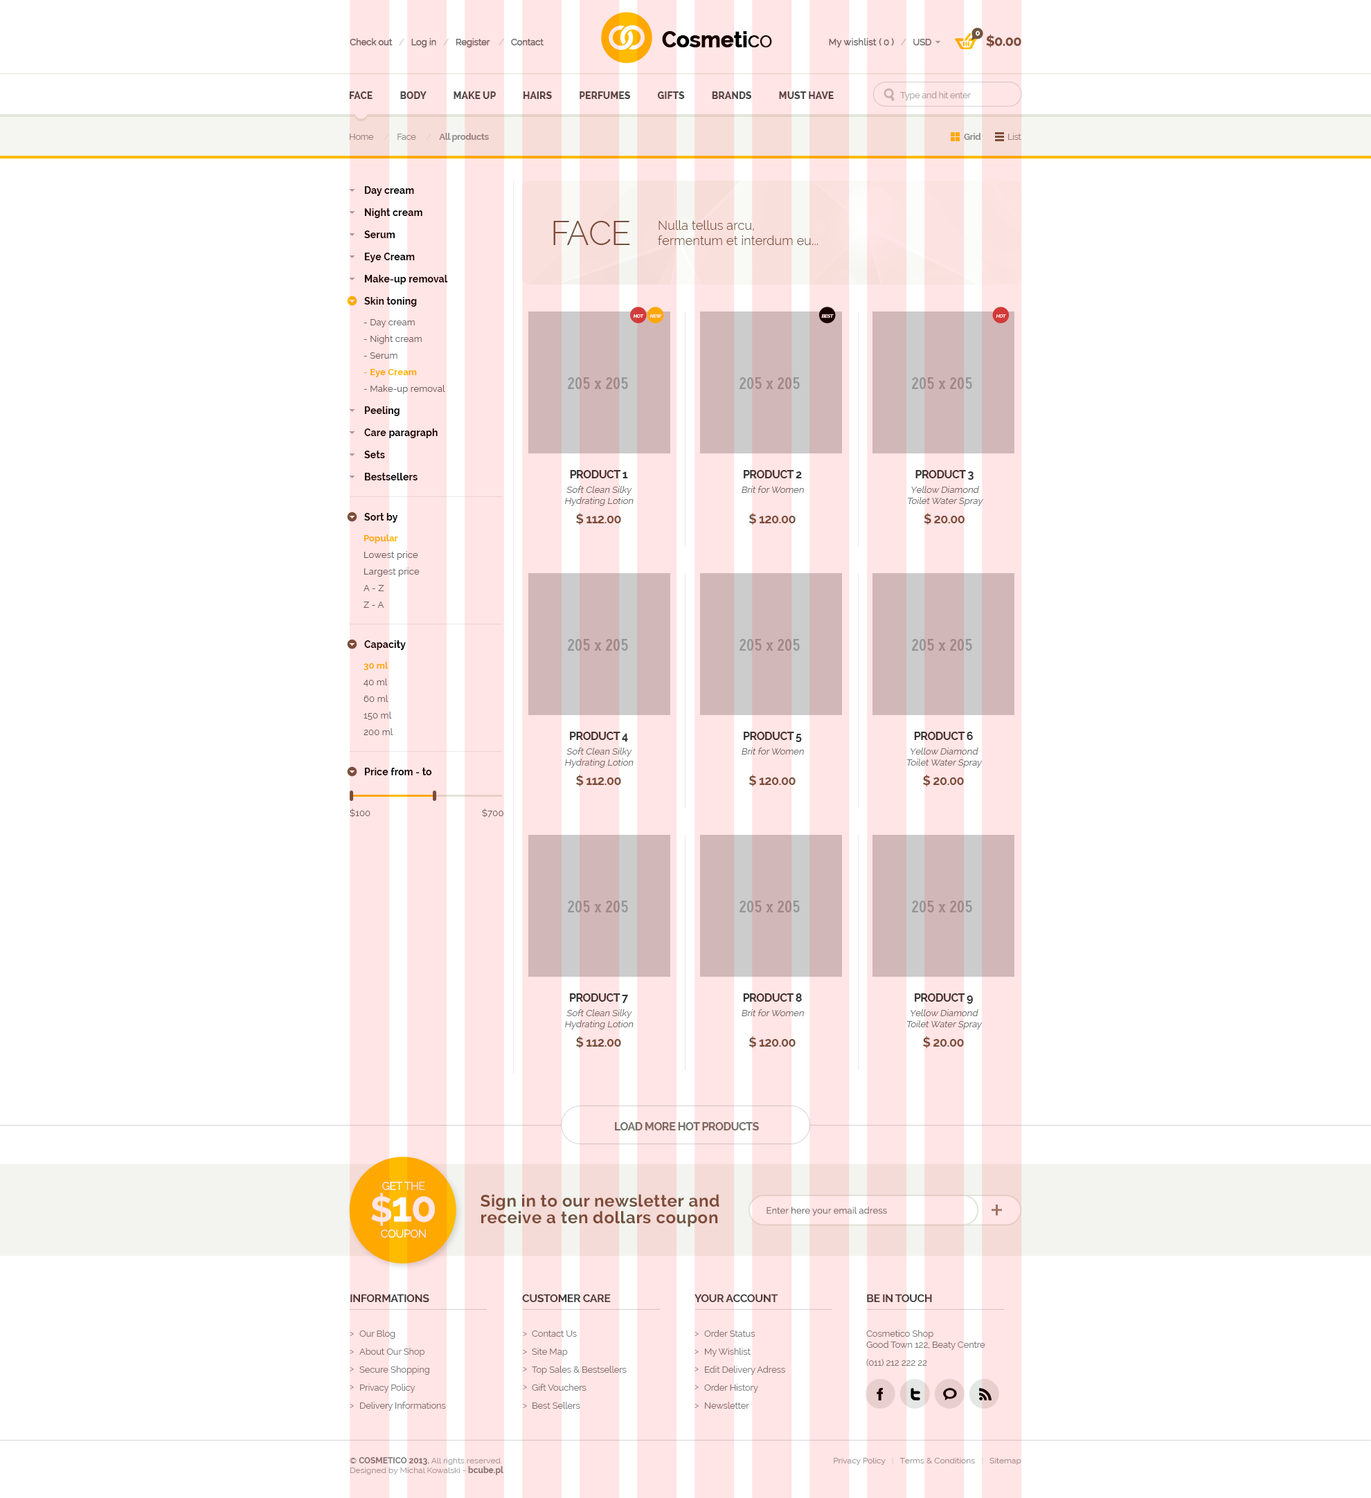
<style>
.page{position:relative;width:1371px;height:1498px;background:#ffffff}
.page>*{position:absolute;margin:0}
.t1{font:9px "Raleway";letter-spacing:-0.03em;color:#727272;font-weight:bold}
.t2{font:9px "Raleway";letter-spacing:-0.03em;color:#d5d5d5;font-weight:bold}
.t3{font:9px "Raleway";letter-spacing:-0.03em;color:#dcdcdc;font-weight:bold}
.t4{font:21.7px "Raleway-Bold";letter-spacing:-0.025em;font-weight:bold}
.t5{font:21.7px "Raleway";letter-spacing:-0.025em;font-weight:bold}
.t6{font:21.7px "Raleway-Light";letter-spacing:-0.025em;font-weight:bold}
.t7{font:9px "Raleway";color:#727272;font-weight:bold}
.t8{font:7.5px "Raleway-Bold";letter-spacing:-0.03em;color:#ffffff}
.t9{font:13.8px "Raleway-Bold";letter-spacing:-0.03em;color:#70543f}
.t10{font:9.7px "Raleway-ExtraBold";color:#4b4b4b}
.t11{font:9px "Raleway";letter-spacing:-0.03em;color:#a8a8a8}
.t12{font:9px "Raleway-Bold";letter-spacing:-0.03em;color:#8f8f8f}
.t13{font:9px "Raleway";letter-spacing:-0.03em;color:#8f8f8f}
.t14{font:9px "Raleway";letter-spacing:-0.03em;color:#e3e6db}
.t15{font:9.7px/22.2px "Raleway-Bold";letter-spacing:0.01em;color:#1a0000}
.t16{font:33.2px "Raleway-Light";letter-spacing:-0.03em;color:#70543f}
.t17{font:12.5px "Raleway-Light";letter-spacing:0.01em;color:#70543f}
.t18{font:4.5px "Raleway-Bold";font-style:italic}
.t19{font:4.5px "Raleway-Bold";color:#ffe5e5;font-style:italic}
.t20{font:9px/16.6px "Raleway";letter-spacing:0.01em;color:#636363}
.t21{font:9px/16.6px "Raleway";letter-spacing:0.01em;color:#ffbb00}
.t22{font:9px/16.6px "Raleway-Bold";letter-spacing:0.01em;color:#ffbb00}
.t23{font:9px "Raleway";color:#6e6e6e;font-style:italic}
.t24{font:11.1px/4.3px "Raleway-Bold";letter-spacing:-0.03em;color:#353535}
.t25{font:9.7px "Raleway-Bold";letter-spacing:0.01em;color:#1a0000}
.t26{font:12.5px "Raleway-Bold";letter-spacing:-0.03em;color:#70543f}
.t27{font:9.7px "Raleway-Bold";letter-spacing:0.01em}
.t28{font:9px "Raleway";letter-spacing:0.01em;color:#636363}
.t29{font:11.1px "Raleway-Bold";letter-spacing:-0.03em;color:#70726a}
.t30{font:11px/29.3px "Raleway";letter-spacing:-0.03em;color:#ffe5e5}
.t31{font:35.1px/31.8px "Raleway-Bold";letter-spacing:-0.03em;color:#ffe5e5}
.t32{font:42.1px/31.8px "Raleway-Bold";letter-spacing:-0.03em;color:#ffe5e5}
.t33{font:11px/15.9px "Raleway";letter-spacing:-0.03em;color:#ffe5e5}
.t34{font:16.6px/16.6px "Raleway-Bold";letter-spacing:0.025em;color:#70543f}
.t35{font:9px "Raleway";letter-spacing:0.01em;color:#717171}
.t36{font:11.1px "Raleway-Bold";letter-spacing:-0.03em;color:#3f3f3f}
.t37{font:9px/18px "Raleway";letter-spacing:-0.01em;color:#7b7b7b}
.t38{font:9px "Raleway";letter-spacing:-0.01em;color:#7b7b7b}
.t39{font:8.3px "Raleway";color:#a1a1a1}
.t40{font:8.3px "Raleway";color:#7b7b7b}
.t41{font:8.3px "Raleway-Bold";color:#7b7b7b}
.t42{font:8.3px "Raleway";color:#a3a3a3}
.t43{font:8.3px "Raleway";color:#999999}
.t44{font:8.3px "Raleway";color:#e0e0e0}
.t45{font:8.3px "Raleway";color:#e4e4e4}
</style>
<div class="page">
<p class="t1" style="left:350px;top:38px;width:193px;height:10px">Check out   <span class="t2">/</span>   Log in   <span class="t3">/</span>   Register    <span class="t3">/</span>   Contact</p>
<p class="t4" style="left:662px;top:31px;width:110px;height:17px">Cosmeti<span class="t5">c</span><span class="t6">o</span></p>
<p class="t7" style="left:829px;top:38px;width:102px;height:10px">My wishlist <span class="t1">( 0 )   </span><span class="t2">/</span><span class="t1">   USD</span></p>
<p class="t8" style="left:975px;top:30px;width:5px;height:6px">0</p>
<p class="t9" style="left:986px;top:34px;width:35px;height:14px">$0.00</p>
<p class="t10" style="left:350px;top:91px;width:484px;height:8px">FACE            BODY            MAKE UP            HAIRS            PERFUMES            GIFTS            BRANDS            MUST HAVE</p>
<p class="t11" style="left:900px;top:91px;width:71px;height:9px">Type and hit enter</p>
<p class="t12" style="left:350px;top:133px;width:139px;height:9px"><span class="t13">Home     </span><span class="t14">/</span><span class="t13">    Face     </span><span class="t14">/    </span>All products</p>
<p class="t12" style="left:964px;top:133px;width:17px;height:7px">Grid</p>
<p class="t13" style="left:1008px;top:133px;width:13px;height:7px">List</p>
<p class="t15" style="left:364px;top:186px;width:84px;height:121px">Day cream<br>Night cream<br>Serum<br>Eye Cream<br>Make-up removal<br>Skin toning</p>
<p class="t16" style="left:553px;top:221px;width:77px;height:24px">FACE</p>
<p class="t17" style="left:658px;top:220px;width:160px;height:25px">Nulla tellus arcu, <br>fermentum et interdum eu...</p>
<p class="t18" style="left:633px;top:314px;width:11px;height:4px">HOT</p>
<p class="t19" style="left:649px;top:314px;width:13px;height:4px">NEW</p>
<p class="t19" style="left:821px;top:314px;width:13px;height:4px">BEST</p>
<p class="t19" style="left:996px;top:314px;width:10px;height:4px">HOT</p>
<p class="t20" style="left:363px;top:319px;width:82px;height:75px">- Day cream<br>- Night cream<br>- Serum<br><span class="t21">- </span><span class="t22">Eye Cream<br></span>- Make-up removal</p>
<p class="t15" style="left:364px;top:406px;width:74px;height:74px">Peeling<br>Care paragraph<br>Sets<br>Bestsellers</p>
<p class="t23" style="left:565px;top:470px;width:68px;height:36px;text-align:center"><span class="t24">PRODUCT 1<br><br></span>Soft Clean Silky<br>Hydrating Lotion</p>
<p class="t23" style="left:741px;top:470px;width:63px;height:23px;text-align:center"><span class="t24">PRODUCT 2<br><br></span>Brit for Women</p>
<p class="t23" style="left:908px;top:470px;width:75px;height:36px;text-align:center"><span class="t24">PRODUCT 3<br><br></span>Yellow Diamond<br>Toilet Water Spray</p>
<p class="t25" style="left:364px;top:513px;width:34px;height:10px">Sort by</p>
<p class="t26" style="left:576px;top:513px;width:45px;height:12px">$ 112.00</p>
<p class="t26" style="left:748px;top:513px;width:47px;height:12px">$ 120.00</p>
<p class="t26" style="left:924px;top:513px;width:40px;height:12px">$ 20.00</p>
<p class="t20" style="left:363px;top:534px;width:57px;height:74px"><span class="t22">Popular<br></span>Lowest price<br>Largest price<br>A - Z<br>Z - A</p>
<p class="t27" style="left:364px;top:640px;width:42px;height:10px">Capacity</p>
<p class="t20" style="left:363px;top:662px;width:30px;height:73px"><span class="t22">30 ml<br></span>40 ml<br>60 ml<br>150 ml<br>200 ml</p>
<p class="t23" style="left:565px;top:732px;width:68px;height:36px;text-align:center"><span class="t24">PRODUCT 4<br><br></span>Soft Clean Silky<br>Hydrating Lotion</p>
<p class="t23" style="left:741px;top:732px;width:63px;height:23px;text-align:center"><span class="t24">PRODUCT 5<br><br></span>Brit for Women</p>
<p class="t23" style="left:906px;top:732px;width:76px;height:36px;text-align:center"><span class="t24">PRODUCT 6<br><br></span>Yellow Diamond<br>Toilet Water Spray</p>
<p class="t25" style="left:364px;top:768px;width:68px;height:7px">Price from - to</p>
<p class="t26" style="left:576px;top:775px;width:45px;height:11px">$ 112.00</p>
<p class="t26" style="left:748px;top:775px;width:47px;height:11px">$ 120.00</p>
<p class="t26" style="left:923px;top:775px;width:41px;height:11px">$ 20.00</p>
<p class="t28" style="left:350px;top:809px;width:20px;height:9px">$100</p>
<p class="t28" style="left:482px;top:809px;width:21px;height:9px">$700</p>
<p class="t23" style="left:565px;top:993px;width:68px;height:36px;text-align:center"><span class="t24">PRODUCT 7<br><br></span>Soft Clean Silky<br>Hydrating Lotion</p>
<p class="t23" style="left:741px;top:993px;width:63px;height:23px;text-align:center"><span class="t24">PRODUCT 8<br><br></span>Brit for Women</p>
<p class="t23" style="left:906px;top:993px;width:76px;height:36px;text-align:center"><span class="t24">PRODUCT 9<br><br></span>Yellow Diamond<br>Toilet Water Spray</p>
<p class="t26" style="left:576px;top:1036px;width:45px;height:12px">$ 112.00</p>
<p class="t26" style="left:748px;top:1036px;width:47px;height:12px">$ 120.00</p>
<p class="t26" style="left:923px;top:1036px;width:41px;height:12px">$ 20.00</p>
<p class="t29" style="left:615px;top:1122px;width:144px;height:9px">LOAD MORE HOT PRODUCTS</p>
<p class="t30" style="left:371px;top:1182px;width:64px;height:56px;text-align:center">GET THE<br><span class="t31">$</span><span class="t32">10<br></span><span class="t33">COUPON</span></p>
<p class="t34" style="left:480px;top:1194px;width:239px;height:33px">Sign in to our newsletter and<br>receive a ten dollars coupon</p>
<p class="t35" style="left:766px;top:1207px;width:121px;height:9px">Enter here your email adress</p>
<p class="t36" style="left:350px;top:1294px;width:79px;height:9px">INFORMATIONS</p>
<p class="t36" style="left:522px;top:1294px;width:89px;height:9px">CUSTOMER CARE</p>
<p class="t36" style="left:694px;top:1294px;width:84px;height:8px">YOUR ACCOUNT</p>
<p class="t36" style="left:867px;top:1294px;width:65px;height:8px">BE IN TOUCH</p>
<p class="t37" style="left:359px;top:1330px;width:87px;height:81px">Our Blog<br>About Our Shop<br>Secure Shopping<br>Privacy Policy<br>Delivery Informations</p>
<p class="t37" style="left:532px;top:1331px;width:95px;height:78px">Contact Us<br>Site Map<br>Top Sales &amp; Bestsellers<br>Gift Vouchers<br>Best Sellers</p>
<p class="t37" style="left:704px;top:1330px;width:81px;height:79px">Order Status<br>My Wishlist<br>Edit Delivery Adress<br>Order History<br>Newsletter</p>
<p class="t38" style="left:866px;top:1330px;width:119px;height:37px"><span class="t37">Cosmetico Shop</span><br>Good Town 122, Beaty Centre<br><span class="t37">(011) 212 222 22</span></p>
<p class="t39" style="left:350px;top:1457px;width:153px;height:18px"><span class="t40">© </span><span class="t41">COSMETICO 2013. </span><span class="t42">All rights reserved.<br></span>Designed by Michal Kowalski - <span class="t41">bcube.pl</span></p>
<p class="t43" style="left:834px;top:1457px;width:187px;height:8px">Privacy Policy   <span class="t44">|</span>   Terms &amp; Conditions   <span class="t45">|</span>   Sitemap</p>
</div>
